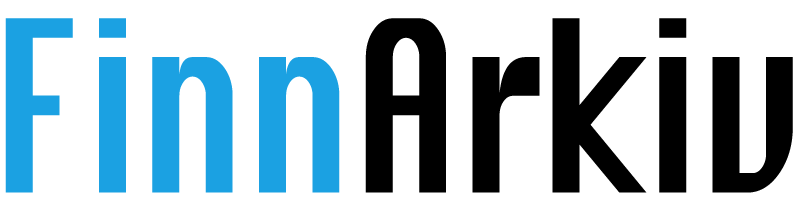
<style>
.page{position:relative;width:800px;height:200px;background:#ffffff}
.page>*{position:absolute;margin:0}
.t1{font:232px "Silom";color:#000000;scale:0.69 1}
.t2{font:232px "Silom";color:#1ba1e2;scale:0.69 1}
</style>
<div class="page">
<p class="t1" style="left:5px;top:18px;width:788px;height:175px"><span class="t2">Finn</span>Arkiv</p>
</div>
